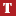
<style>
.page{position:relative;width:16px;height:16px;background:#af1e23}
.page>*{position:absolute;margin:0}
.t1{font:15.3px "Stencil";color:#ffffff}
</style>
<div class="page">
<p class="t1" style="left:3px;top:3px;width:9px;height:10px">T</p>
</div>
